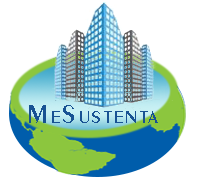
<style>
.page{position:relative;width:200px;height:179px;background:#ffffff}
.page>*{position:absolute;margin:0}
.t1{font:27.2px "Exotic350BT-DemiBold";letter-spacing:0.075em;color:#185293;font-variant:small-caps}
</style>
<div class="page">
<p class="t1" style="left:29px;top:105px;width:129px;height:18px">MeSustenta</p>
</div>
